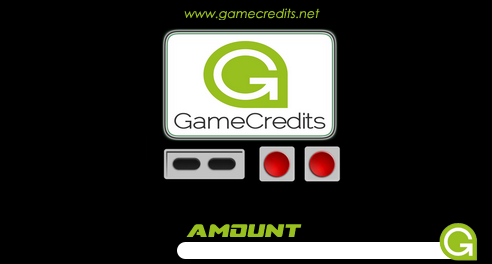
<style>
.page{position:relative;width:492px;height:264px;background:#000000}
.page>*{position:absolute;margin:0}
.t1{font:12.5px "CenturyGothic";color:#98c01f;font-style:italic}
.t2{font:22.5px "SuperCommando";color:#98c01f;font-style:italic}
</style>
<div class="page">
<p class="t1" style="left:184px;top:8px;width:136px;height:13px">www.gamecredits.net</p>
<p class="t2" style="left:186px;top:224px;width:116px;height:13px">Amount</p>
</div>
